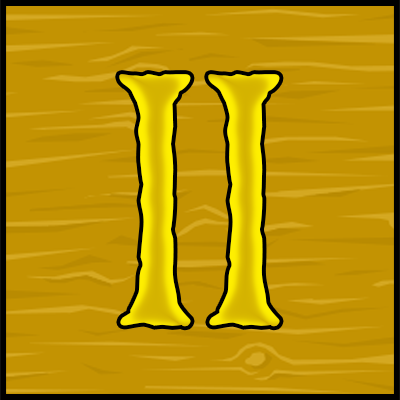
<style>
.page{position:relative;width:400px;height:400px;background:#c39302}
.page>*{position:absolute;margin:0}
.t1{font:268px "PRViking01";font-weight:bold}
</style>
<div class="page">
<p class="t1" style="left:119px;top:74px;width:161px;height:253px">II</p>
</div>
